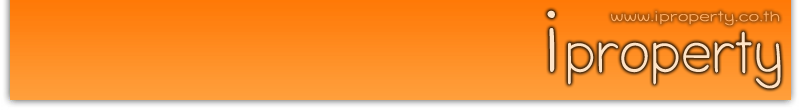
<style>
.page{position:relative;width:800px;height:110px}
.page>*{position:absolute;margin:0}
.t1{font:79.3px "LayijiMaHaNiYomBAOOT";color:#fee3c6}
.t2{font:120.6px "LayijiMaHaNiYomBAOOT";color:#fee3c6}
.t3{font:19.4px "LayijiMaHaNiYomBAOOT";color:#ffae65;scale:1.4 1}
</style>
<div class="page">
<p class="t1" style="left:547px;top:10px;width:234px;height:79px"><span class="t2">i</span>property</p>
<p class="t3" style="left:611px;top:11px;width:169px;height:15px">www.iproperty.co.th</p>
</div>
